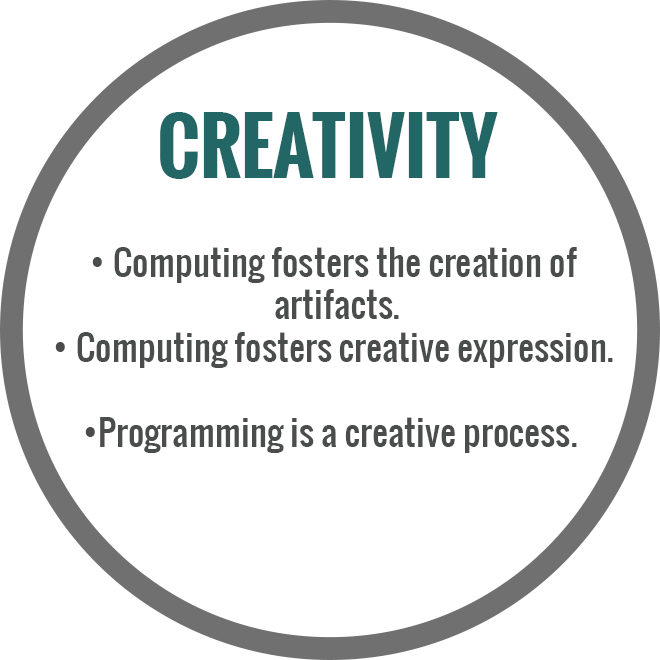
<style>
.page{position:relative;width:660px;height:660px;background:#ffffff}
.page>*{position:absolute;margin:0}
.t1{font:75px "Oswald-Bold";color:#236666}
.t2{font:35.4px "Oswald-Regular";color:#494d4c}
</style>
<div class="page">
<p class="t1" style="left:160px;top:112px;width:338px;height:67px">CREATIVITY</p>
<p class="t2" style="left:55px;top:247px;width:558px;height:206px;text-align:center">• Computing fosters the creation of<br> artifacts.<br>• Computing fosters creative expression.<br><br>•Programming is a creative process.</p>
</div>
